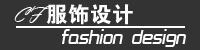
<style>
.page{position:relative;width:200px;height:50px;background:#333333}
.page>*{position:absolute;margin:0}
.t1{font:19px/25px "TRENDS";color:#ffffff;font-style:italic}
.t2{font:22px/25px "VladimirScript";color:#ffffff}
.t3{font:22px/25px "FZDHTK--GBK1-0";color:#ffffff}
</style>
<div class="page">
<p class="t1" style="left:14px;top:4px;width:172px;height:43px"><span class="t2">CF</span><span class="t3">服饰设计<br></span>     fashion design</p>
</div>
